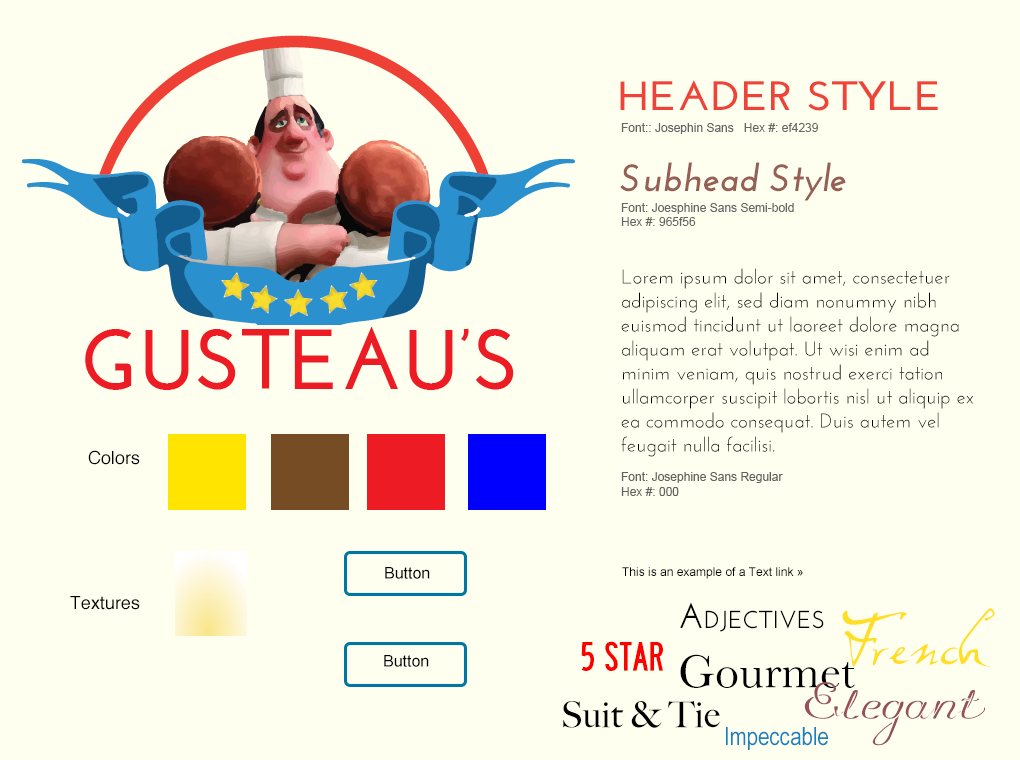
<style>
.page{position:relative;width:1020px;height:760px;background:#ffffef}
.page>*{position:absolute;margin:0}
.t1{font:41px "JosefinSans-Bold";color:#ef4239;text-transform:uppercase;scale:1.12 1}
.t2{font:12px "ArialMT";color:#666666}
.t3{font:38px "JosefinSans-BoldItalic";color:#965f56}
.t4{font:12px/14px "ArialMT";color:#666666}
.t5{font:12px/24px "ArialMT";color:#666666}
.t6{font:20px/24px "JosefinSans";color:#000000}
.t7{font:18px "Helvetica";color:#000000}
.t8{font:12px/15px "ArialMT";color:#636161}
.t9{font:16px "ArialMT";color:#000000}
.t10{font:12px "ArialMT";color:#000000}
.t11{font:35px "JosefinSans-SemiBold";color:#000000;font-variant:small-caps}
.t12{font:59px "Dali";color:#ffde25}
.t13{font:36px "Roadway";color:#ff0000;text-transform:uppercase}
.t14{font:48px "Baskerville";color:#000000}
.t15{font:63px "Promocyja";color:#965156}
.t16{font:36px "BigCaslon-Medium";color:#000000}
.t17{font:25px "ArialNarrow";color:#1780bd}
</style>
<div class="page">
<p class="t1" style="left:620px;top:80px;width:318px;height:31px">Header Style</p>
<p class="t2" style="left:621px;top:123px;width:197px;height:11px">Font:: Josephin Sans   Hex #: ef4239</p>
<p class="t3" style="left:620px;top:162px;width:226px;height:39px">Subhead Style</p>
<p class="t4" style="left:621px;top:203px;width:173px;height:23px"><span class="t5">Font: Joesp</span>hine Sans Semi-bold <br>Hex #: 965f56</p>
<p class="t6" style="left:621px;top:268px;width:353px;height:189px">Lorem ipsum dolor sit amet, consectetuer adipiscing elit, sed diam nonummy nibh euismod tincidunt ut laoreet dolore magna aliquam erat volutpat. Ut wisi enim ad minim veniam, quis nostrud exerci tation ullamcorper suscipit lobortis nisl ut aliquip ex ea commodo consequat. Duis autem vel feugait nulla facilisi.</p>
<p class="t7" style="left:88px;top:450px;width:52px;height:15px">Colors</p>
<p class="t8" style="left:621px;top:472px;width:162px;height:24px">Font: Josephine Sans Regular <br>Hex #: 000</p>
<p class="t9" style="left:385px;top:567px;width:45px;height:12px">Button</p>
<p class="t10" style="left:622px;top:567px;width:181px;height:12px">This is an example of a Text link »</p>
<p class="t7" style="left:70px;top:596px;width:70px;height:14px">Textures</p>
<p class="t11" style="left:680px;top:602px;width:144px;height:30px">Adjectives</p>
<p class="t12" style="left:842px;top:608px;width:153px;height:60px">French</p>
<p class="t13" style="left:581px;top:641px;width:82px;height:30px">5 Star</p>
<p class="t14" style="left:680px;top:654px;width:175px;height:34px">Gourmet</p>
<p class="t9" style="left:384px;top:655px;width:45px;height:12px">Button</p>
<p class="t15" style="left:804px;top:682px;width:181px;height:64px">Elegant</p>
<p class="t16" style="left:563px;top:701px;width:157px;height:27px">Suit &amp; Tie</p>
<p class="t17" style="left:726px;top:727px;width:102px;height:23px">Impeccable</p>
</div>
